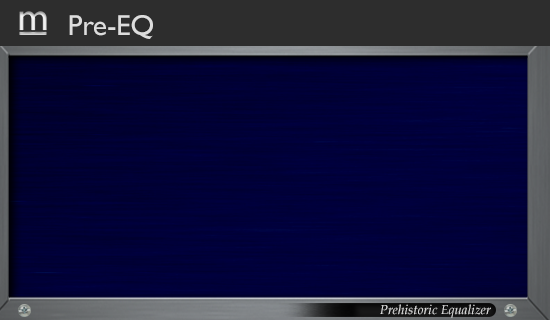
<style>
.page{position:relative;width:550px;height:320px}
.page>*{position:absolute;margin:0}
.t1{font:28.9px "GillSansMT";color:#dddddd}
.t2{font:13.1px "BookAntiqua-Italic";color:#dddddd}
</style>
<div class="page">
<p class="t1" style="left:69px;top:15px;width:84px;height:24px">Pre-EQ</p>
<p class="t2" style="left:380px;top:304px;width:111px;height:14px">Prehistoric Equalizer</p>
</div>
